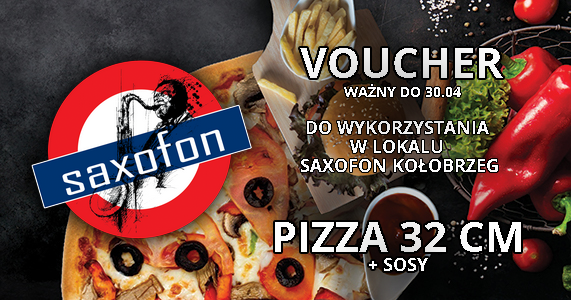
<style>
.page{position:relative;width:571px;height:300px}
.page>*{position:absolute;margin:0}
.t1{font:42px "OpenSans-Bold";color:#fefefe}
.t2{font:14px "OpenSans-Bold";color:#fefefe}
.t3{font:18px/19.2px "OpenSans-Bold";color:#fefefe}
.t4{font:18px "OpenSans-Bold";color:#fefefe}
</style>
<div class="page">
<p class="t1" style="left:300px;top:48px;width:203px;height:30px">VOUCHER</p>
<p class="t2" style="left:344px;top:84px;width:117px;height:13px">WAŻNY DO 30.04</p>
<p class="t3" style="left:301px;top:121px;width:197px;height:51px;text-align:center">DO WYKORZYSTANIA <br>W LOKALU <br>SAXOFON KOŁOBRZEG</p>
<p class="t1" style="left:275px;top:222px;width:246px;height:30px">PIZZA 32 CM</p>
<p class="t4" style="left:369px;top:258px;width:59px;height:13px">+ SOSY</p>
</div>
